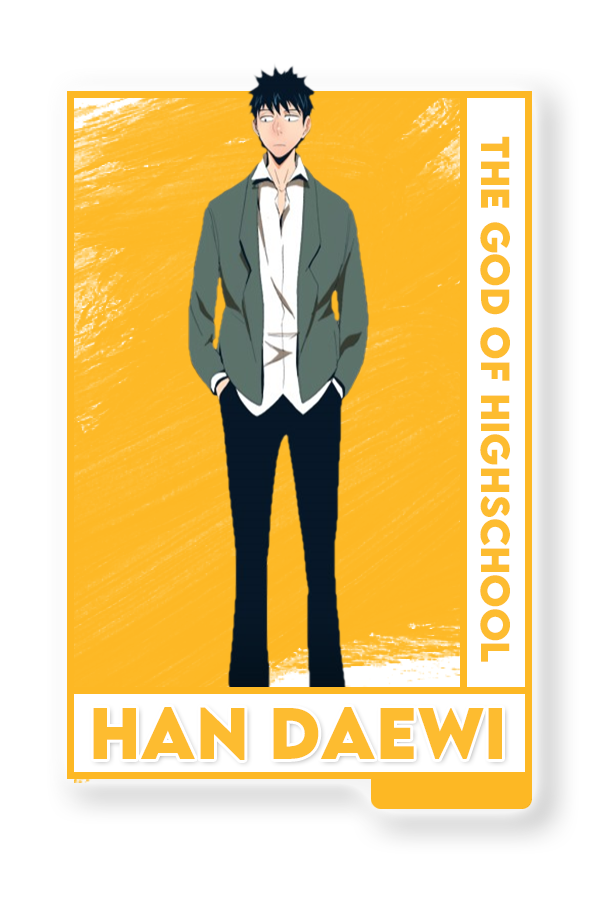
<style>
.page{position:relative;width:600px;height:900px;background:#ffffff}
.page>*{position:absolute;margin:0}
.t1{font:36px "LEMONMILK-Bold";color:#fdbc30}
.t2{font:65.2px "LEMONMILK-Bold";color:#fdbc30}
</style>
<div class="page">
<p class="t1" style="left:480px;top:136px;width:30px;height:526px;rotate:90deg">the god of highschool</p>
<p class="t2" style="left:93px;top:707px;width:409px;height:53px">Han Daewi</p>
</div>
